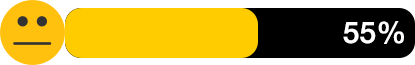
<style>
.page{position:relative;width:415px;height:65px;background:#ffcc00}
.page>*{position:absolute;margin:0}
.t1{font:30px "HelveticaNeueCyr-Medium";color:#ffffff}
</style>
<div class="page">
<p class="t1" style="left:343px;top:21px;width:61px;height:23px">55%</p>
</div>
